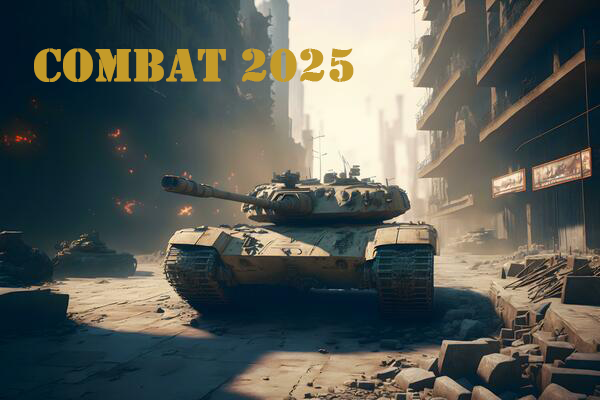
<style>
.page{position:relative;width:600px;height:400px}
.page>*{position:absolute;margin:0}
.t1{font:48px "Stencil";color:#c49b29;font-weight:bold}
</style>
<div class="page">
<p class="t1" style="left:34px;top:48px;width:320px;height:34px">Combat 2025</p>
</div>
